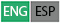
<style>
.page{position:relative;width:60px;height:23px;background:#828484}
.page>*{position:absolute;margin:0}
.t1{font:13.8px "MyriadPro-Regular";color:#ffffff}
.t2{font:13.8px "MyriadPro-Regular";color:#030303}
</style>
<div class="page">
<p class="t1" style="left:4px;top:6px;width:23px;height:10px">ENG</p>
<p class="t2" style="left:36px;top:6px;width:19px;height:10px">ESP</p>
</div>
